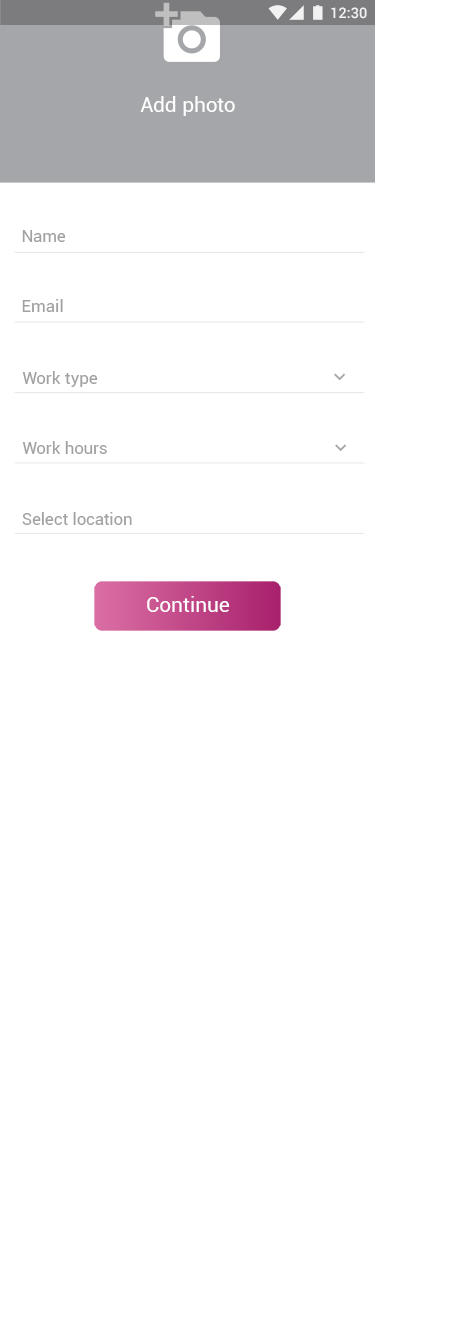
<style>
.page{position:relative;width:476px;height:1333px;background:#ffffff}
.page>*{position:absolute;margin:0}
.t1{font:14.6px "Roboto-Medium";color:#ffffff}
.t2{font:20.8px "Roboto-Regular";letter-spacing:0.01em;color:#ffffff}
.t3{font:16.7px "Roboto-Regular";letter-spacing:0.01em;color:#a1a1a1}
.t4{font:20.8px "Roboto-Regular";color:#ffffff}
</style>
<div class="page">
<p class="t1" style="left:331px;top:7px;width:36px;height:12px">12:30</p>
<p class="t2" style="left:140px;top:96px;width:95px;height:20px">Add photo</p>
<p class="t3" style="left:22px;top:230px;width:44px;height:12px">Name</p>
<p class="t3" style="left:22px;top:299px;width:41px;height:13px">Email</p>
<p class="t3" style="left:22px;top:371px;width:76px;height:16px">Work type</p>
<p class="t3" style="left:22px;top:441px;width:85px;height:13px">Work hours</p>
<p class="t3" style="left:22px;top:512px;width:110px;height:13px">Select location</p>
<p class="t4" style="left:147px;top:596px;width:83px;height:16px">Continue</p>
</div>
